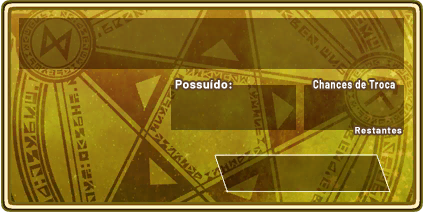
<style>
.page{position:relative;width:424px;height:212px}
.page>*{position:absolute;margin:0}
.t1{font:12px "Barlow-Bold";letter-spacing:0.05em;color:#ffffff}
.t2{font:12px "Barlow-Bold";letter-spacing:0.075em;color:#ffffff;scale:0.76 1}
.t3{font:9.2px "Barlow-Bold";letter-spacing:0.075em;color:#ffffff}
</style>
<div class="page">
<p class="t1" style="left:175px;top:80px;width:57px;height:9px">Possuído:</p>
<p class="t2" style="left:313px;top:80px;width:82px;height:9px">Chances de Troca</p>
<p class="t3" style="left:355px;top:127px;width:47px;height:7px">Restantes</p>
</div>
